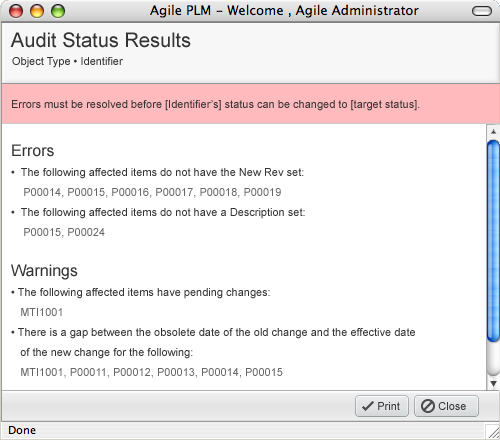
<style>
.page{position:relative;width:500px;height:440px;background:#ffffff}
.page>*{position:absolute;margin:0}
.t1{font:20px "ArialMT";color:#333333}
.t2{font:11px "ArialMT";color:#333333}
.t3{font:11px/20px "ArialMT";color:#333333}
.t4{font:16px/20px "ArialMT";color:#333333}
.t5{font:11px/18px "ArialMT";color:#333333}
.t6{font:11px/18px "ArialMT";color:#666666}
.t7{font:11px/20px "ArialMT";color:#666666}
</style>
<div class="page">
<p class="t1" style="left:10px;top:32px;width:181px;height:16px">Audit Status Results</p>
<p class="t2" style="left:12px;top:57px;width:111px;height:11px">Object Type • Identifier</p>
<p class="t2" style="left:12px;top:100px;width:408px;height:11px">Errors must be resolved before [Identifier’s] status can be changed to [target status].</p>
<p class="t3" style="left:11px;top:144px;width:404px;height:234px"><span class="t4">Errors</span><br>•  <span class="t5">The following affected items do not have the New Rev set:  <br>    </span><span class="t6">P00014, P00015, P00016, </span><span class="t7">P00017, P00018, P00019<br></span>•  The following affected items do not have a Description set:  <br> <span class="t7">   P00015, P00024<br></span><span class="t4"><br>Warnings</span>  <br>• The following affected items have pending changes:<br>   <span class="t7">MTI1001<br></span>• There is a gap between the obsolete date of the old change and the effective date <br>   of the new change for the following:<br>   <span class="t7">MTI1001, P00011, P00012, P00013, P00014, P00015</span></p>
<p class="t2" style="left:378px;top:402px;width:22px;height:8px">Print</p>
<p class="t2" style="left:438px;top:402px;width:28px;height:8px">Close</p>
</div>
